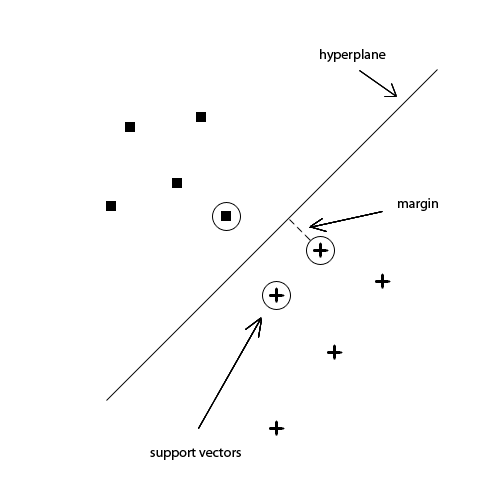
<style>
.page{position:relative;width:500px;height:500px;background:#ffffff}
.page>*{position:absolute;margin:0}
.t1{font:14px "MyriadPro-Regular";color:#000000}
</style>
<div class="page">
<p class="t1" style="left:320px;top:49px;width:66px;height:13px">hyperplane</p>
<p class="t1" style="left:398px;top:198px;width:40px;height:13px">margin</p>
<p class="t1" style="left:150px;top:448px;width:91px;height:12px">support vectors</p>
</div>
